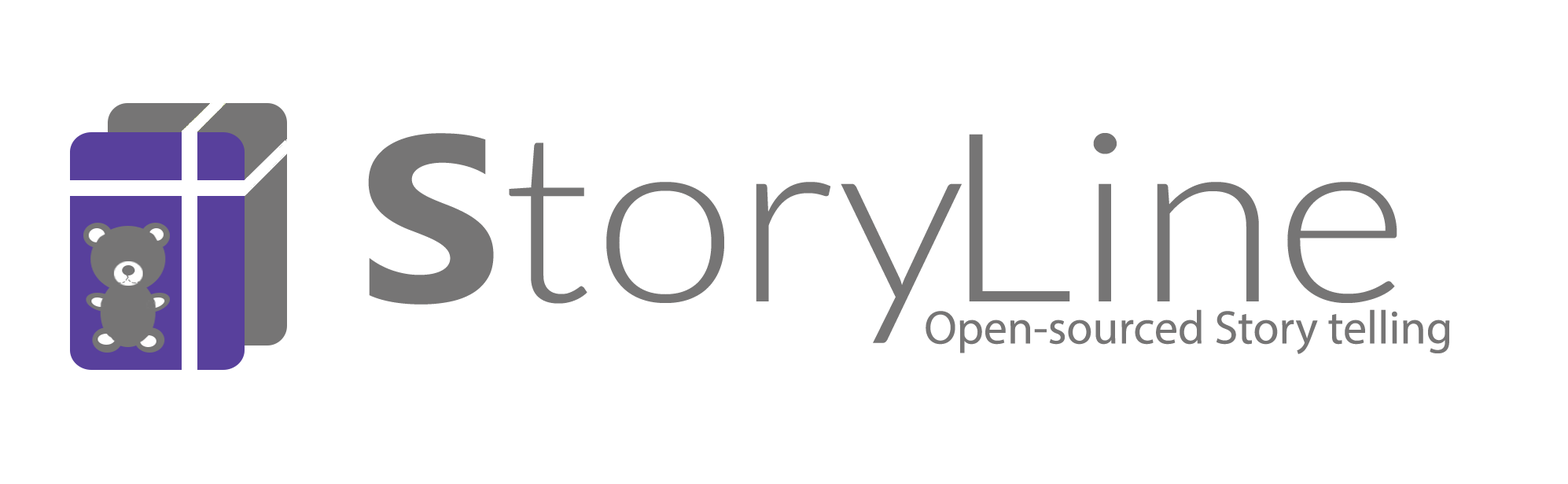
<style>
.page{position:relative;width:1568px;height:484px;background:#ffffff}
.page>*{position:absolute;margin:0}
.t1{font:47.2px "MyriadPro-Regular";color:#767575}
</style>
<div class="page">
<p class="t1" style="left:926px;top:309px;width:524px;height:45px">Open-sourced Story telling</p>
</div>
